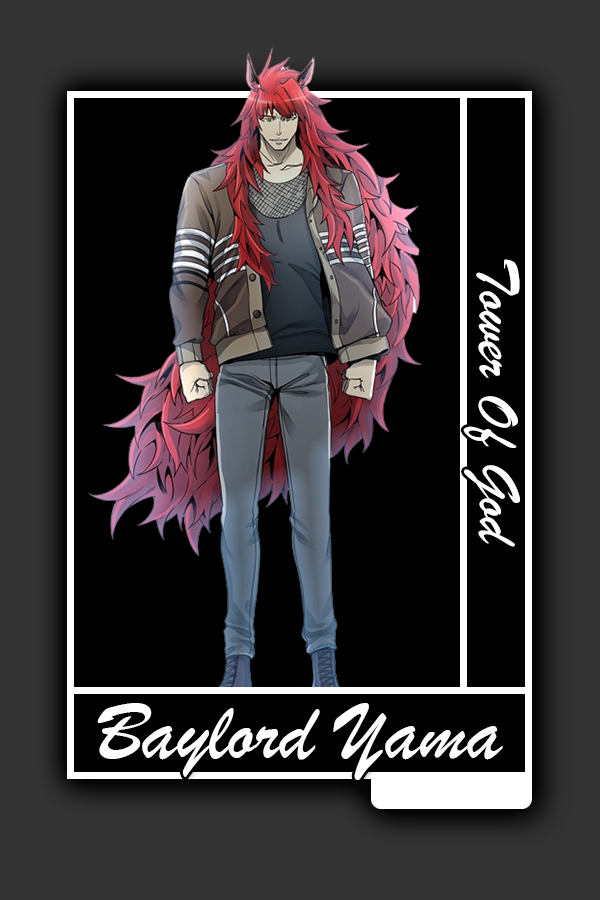
<style>
.page{position:relative;width:600px;height:900px;background:#000000}
.page>*{position:absolute;margin:0}
.t1{font:61.5px "BrushScriptMT";color:#ffffff}
.t2{font:84.8px "BrushScriptMT";color:#ffffff}
</style>
<div class="page">
<p class="t1" style="left:463px;top:259px;width:57px;height:288px;rotate:90deg">Tower Of God</p>
<p class="t2" style="left:97px;top:703px;width:406px;height:77px">Baylord Yama</p>
</div>
